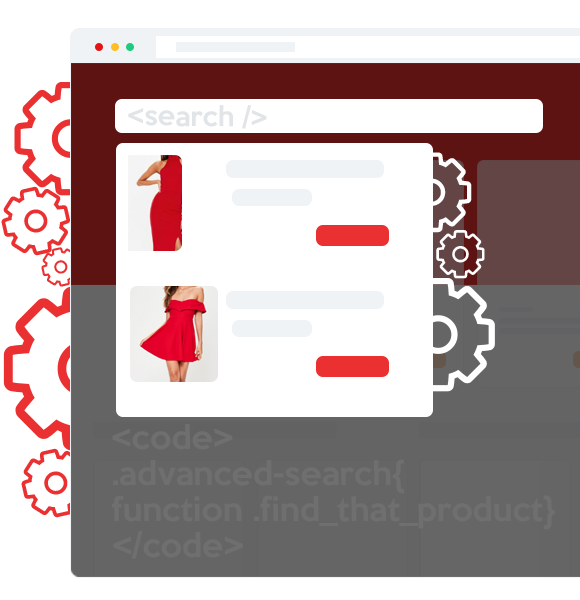
<style>
.page{position:relative;width:580px;height:600px;background:#ffffff}
.page>*{position:absolute;margin:0}
.t1{font:25.2px "KeepCalm-Medium";color:#e2e5e7}
.t2{font:30px "KeepCalm-Medium";color:#6f6f6f}
</style>
<div class="page">
<p class="t1" style="left:128px;top:105px;width:139px;height:24px;rotate:1deg">&lt;search /&gt;</p>
<p class="t2" style="left:112px;top:424px;width:443px;height:135px">&lt;code&gt;<br>.advanced-search{<br>function .find_that_product}<br>&lt;/code&gt;</p>
</div>
